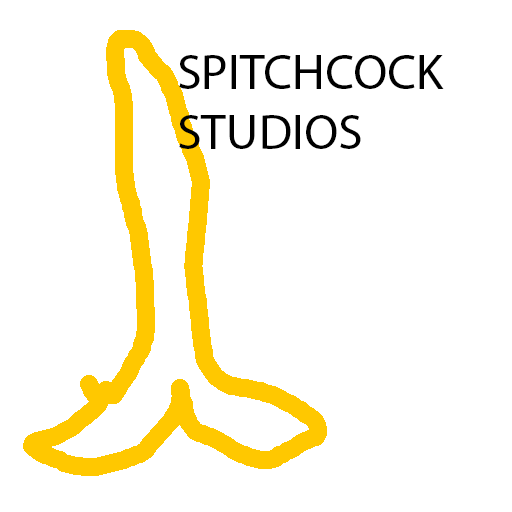
<style>
.page{position:relative;width:512px;height:512px;background:#ffffff}
.page>*{position:absolute;margin:0}
.t1{font:50px "MyriadPro-Regular";color:#000000}
</style>
<div class="page">
<p class="t1" style="left:179px;top:55px;width:265px;height:94px">SPITCHCOCK<br>STUDIOS</p>
</div>
